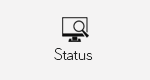
<style>
.page{position:relative;width:150px;height:80px;background:#f4f3f3}
.page>*{position:absolute;margin:0}
.t1{font:18px "HiltonSans";color:#222323}
</style>
<div class="page">
<p class="t1" style="left:54px;top:48px;width:39px;height:12px">Status</p>
</div>
